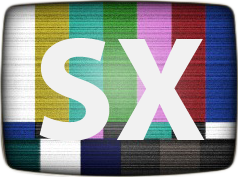
<style>
.page{position:relative;width:238px;height:177px;background:#f1f1f1}
.page>*{position:absolute;margin:0}
.t1{font:150px "MyriadPro-Bold";color:#f1f1f1}
</style>
<div class="page">
<p class="t1" style="left:39px;top:38px;width:166px;height:103px">SX</p>
</div>
